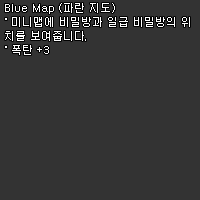
<style>
.page{position:relative;width:200px;height:200px;background:#333333}
.page>*{position:absolute;margin:0}
.t1{font:11px/14px "Dotum";color:#ffffff}
</style>
<div class="page">
<p class="t1" style="left:5px;top:3px;width:185px;height:52px">Blue Map (파란 지도)<br>˚ 미니맵에 비밀방과 일급 비밀방의 위<br>치를 보여줍니다.<br>˚ 폭탄 +3</p>
</div>
